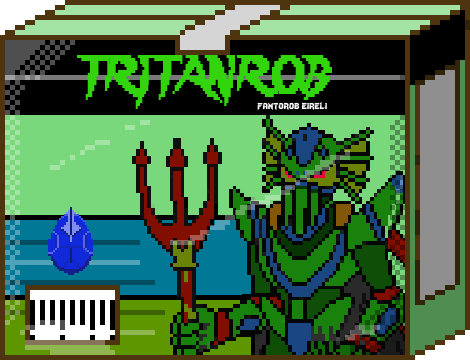
<style>
.page{position:relative;width:470px;height:360px}
.page>*{position:absolute;margin:0}
.t1{font:48px "Lady-Radical";color:#32d40c;scale:0.72 1}
.t2{font:12px "Lady-Radical";color:#fbfbfb}
</style>
<div class="page">
<p class="t1" style="left:77px;top:55px;width:255px;height:54px">TRITANROB</p>
<p class="t2" style="left:257px;top:102px;width:70px;height:8px">fantorob eireli</p>
</div>
